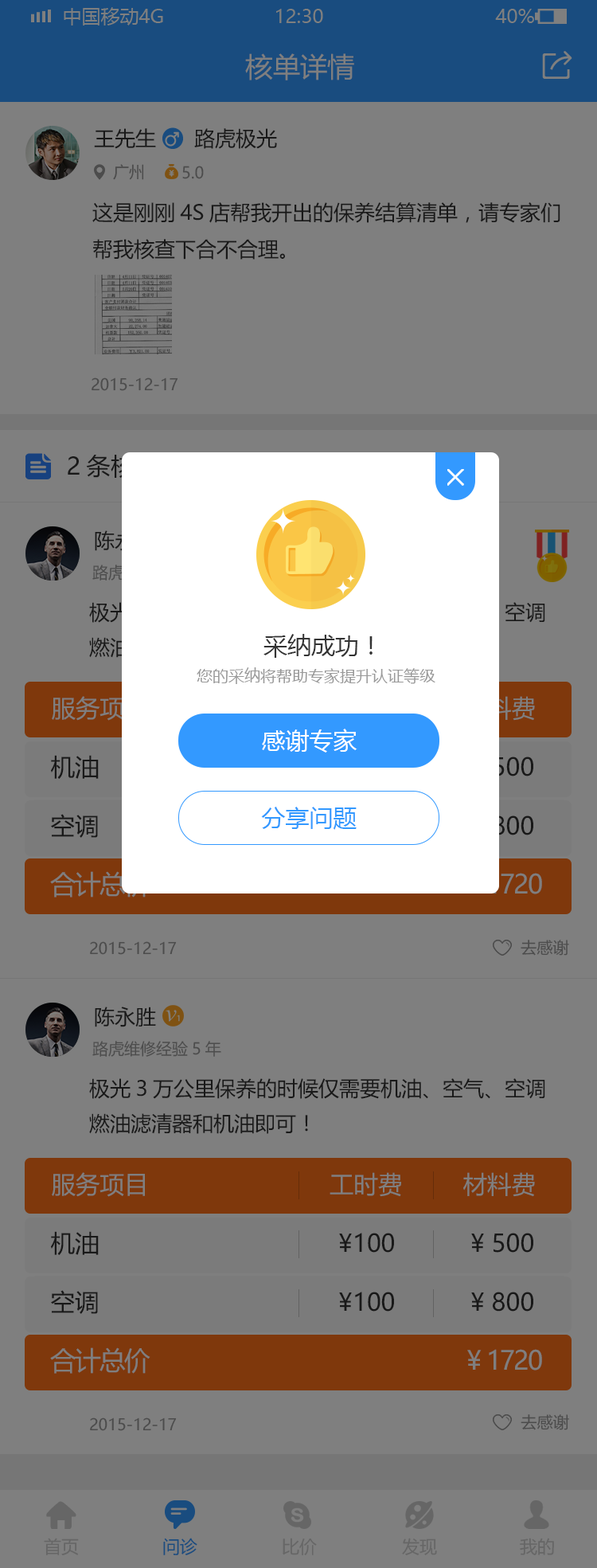
<style>
.page{position:relative;width:597px;height:1568px;background:#7f7f7f}
.page>*{position:absolute;margin:0}
.t1{font:27.1px "MicrosoftYaHei";color:#7f7f7f}
.t2{font:20.7px "MicrosoftYaHei";color:#191919}
.t3{font:15.9px "MicrosoftYaHei";color:#4c4c4c}
.t4{font:23.9px "MicrosoftYaHei";color:#333333}
.t5{font:15.9px "MicrosoftYaHei";color:#999999}
.t6{font:24.3px "MicrosoftYaHei";color:#7f7f7f}
.t7{font:23.9px "MicrosoftYaHei";color:#ffffff}
.t8{font:24.3px "MicrosoftYaHei";color:#191919}
.t9{font:24.3px "MicrosoftYaHei"}
.t10{font:23.9px "MicrosoftYaHei";color:#3399ff}
.t11{font:20.7px/35px "MicrosoftYaHei";color:#191919}
.t12{font:26.1px "MicrosoftYaHei";letter-spacing:-0.06em;color:#7f7f7f}
.t13{font:17.5px "MicrosoftYaHei";color:#666666}
.t14{font:17.5px "MicrosoftYaHei";color:#194c7f}
</style>
<div class="page">
<p class="t1" style="left:245px;top:53px;width:109px;height:27px">核单详情</p>
<p class="t2" style="left:94px;top:128px;width:62px;height:21px">王先生</p>
<p class="t2" style="left:94px;top:128px;width:62px;height:21px">王先生</p>
<p class="t2" style="left:194px;top:128px;width:83px;height:21px">路虎极光</p>
<p class="t2" style="left:194px;top:128px;width:83px;height:21px">路虎极光</p>
<p class="t3" style="left:113px;top:164px;width:31px;height:16px">广州</p>
<p class="t3" style="left:113px;top:164px;width:31px;height:16px">广州</p>
<p class="t3" style="left:182px;top:166px;width:22px;height:13px">5.0</p>
<p class="t3" style="left:182px;top:166px;width:22px;height:13px">5.0</p>
<p class="t2" style="left:92px;top:202px;width:469px;height:58px">这是刚刚4S店帮我开出的保养结算清单，请专家们<br>帮我核查下合不合理。</p>
<p class="t3" style="left:92px;top:377px;width:86px;height:14px">2015-12-17</p>
<p class="t3" style="left:92px;top:377px;width:86px;height:14px">2015-12-17</p>
<p class="t4" style="left:264px;top:634px;width:109px;height:24px">采纳成功！</p>
<p class="t5" style="left:197px;top:667px;width:239px;height:17px">您的采纳将帮助专家提升认证等级</p>
<p class="t6" style="left:52px;top:696px;width:93px;height:25px">服务项目</p>
<p class="t7" style="left:262px;top:729px;width:96px;height:24px">感谢专家</p>
<p class="t8" style="left:51px;top:755px;width:48px;height:24px">机油</p>
<p class="t9" style="left:471px;top:757px;width:63px;height:19px">¥ 500</p>
<p class="t10" style="left:261px;top:807px;width:96px;height:23px">分享问题</p>
<p class="t8" style="left:51px;top:814px;width:47px;height:24px">空调</p>
<p class="t9" style="left:471px;top:815px;width:63px;height:20px">¥ 800</p>
<p class="t9" style="left:471px;top:815px;width:63px;height:20px">¥ 800</p>
<p class="t3" style="left:90px;top:941px;width:87px;height:14px">2015-12-17</p>
<p class="t3" style="left:521px;top:940px;width:48px;height:16px">去感谢</p>
<p class="t2" style="left:95px;top:1007px;width:61px;height:20px">陈永胜</p>
<p class="t3" style="left:92px;top:1041px;width:129px;height:16px">路虎维修经验5年</p>
<p class="t11" style="left:89px;top:1078px;width:456px;height:56px">极光3万公里保养的时候仅需要机油、空气、空调<br>燃油滤清器和机油即可！</p>
<p class="t6" style="left:52px;top:1172px;width:93px;height:25px">服务项目</p>
<p class="t6" style="left:330px;top:1172px;width:71px;height:25px">工时费</p>
<p class="t6" style="left:463px;top:1172px;width:72px;height:25px">材料费</p>
<p class="t8" style="left:51px;top:1231px;width:48px;height:24px">机油</p>
<p class="t8" style="left:339px;top:1233px;width:55px;height:20px">¥100</p>
<p class="t8" style="left:471px;top:1233px;width:63px;height:20px">¥ 500</p>
<p class="t8" style="left:51px;top:1290px;width:47px;height:24px">空调</p>
<p class="t8" style="left:339px;top:1292px;width:55px;height:20px">¥100</p>
<p class="t8" style="left:471px;top:1292px;width:63px;height:20px">¥ 800</p>
<p class="t8" style="left:471px;top:1292px;width:63px;height:20px">¥ 800</p>
<p class="t12" style="left:50px;top:1347px;width:101px;height:27px">合计总价</p>
<p class="t12" style="left:467px;top:1349px;width:75px;height:22px">¥ 1720</p>
<p class="t3" style="left:90px;top:1417px;width:87px;height:14px">2015-12-17</p>
<p class="t3" style="left:521px;top:1414px;width:48px;height:16px">去感谢</p>
<p class="t13" style="left:44px;top:1538px;width:35px;height:17px">首页</p>
<p class="t14" style="left:163px;top:1538px;width:34px;height:17px">问诊</p>
<p class="t13" style="left:283px;top:1538px;width:34px;height:17px">比价</p>
<p class="t13" style="left:402px;top:1538px;width:35px;height:17px">发现</p>
<p class="t13" style="left:520px;top:1538px;width:34px;height:17px">我的</p>
</div>
